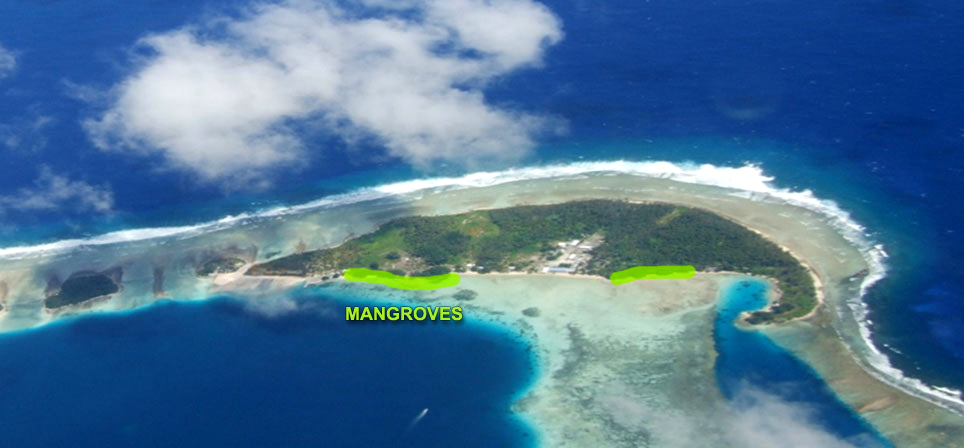
<style>
.page{position:relative;width:964px;height:448px}
.page>*{position:absolute;margin:0}
.t1{font:18px "Arial-BoldMT";color:#a7ef2a}
</style>
<div class="page">
<p class="t1" style="left:346px;top:306px;width:117px;height:15px">MANGROVES</p>
</div>
